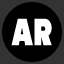
<style>
.page{position:relative;width:64px;height:64px;background:#000000}
.page>*{position:absolute;margin:0}
.t1{font:35.1px "Meloriac";letter-spacing:0.05em;color:#ffffff;scale:0.74 1}
</style>
<div class="page">
<p class="t1" style="left:11px;top:18px;width:41px;height:28px">AR</p>
</div>
